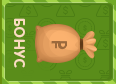
<style>
.page{position:relative;width:116px;height:84px;background:#5a8d1a}
.page>*{position:absolute;margin:0}
.t1{font:15px "RotondaC-Bold";letter-spacing:0.04em;color:#fadcc0;text-transform:uppercase}
</style>
<div class="page">
<p class="t1" style="left:14px;top:18px;width:11px;height:50px;rotate:90deg">бонус</p>
</div>
